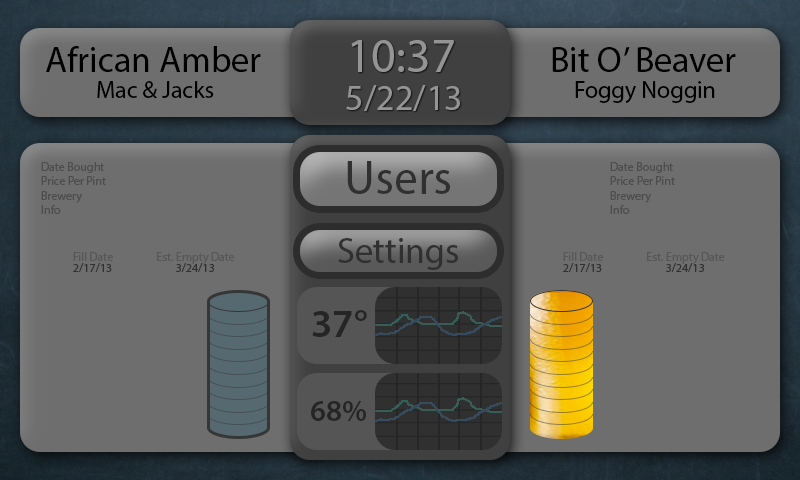
<style>
.page{position:relative;width:800px;height:480px;background:#6e6e6e}
.page>*{position:absolute;margin:0}
.t1{font:48px "MyriadPro-Regular";color:#949494}
.t2{font:36px "MyriadPro-Regular";color:#000000}
.t3{font:24px "MyriadPro-Regular";color:#000000}
.t4{font:36px "MyriadPro-Regular";color:#949494}
.t5{font:48px "MyriadPro-Regular";color:#303030}
.t6{font:12px "MyriadPro-Regular";color:#4d4d4d}
.t7{font:36px "MyriadPro-Regular";color:#303030}
.t8{font:12px "MyriadPro-Regular";color:#575757}
.t9{font:12px "MyriadPro-Regular";color:#313131}
.t10{font:40px "MyriadPro-Semibold";color:#252525}
.t11{font:30px "MyriadPro-Semibold";color:#252525}
</style>
<div class="page">
<p class="t1" style="left:351px;top:40px;width:103px;height:32px">10:37</p>
<p class="t2" style="left:46px;top:46px;width:215px;height:26px">African Amber</p>
<p class="t2" style="left:552px;top:47px;width:184px;height:25px">Bit O’ Beaver</p>
<p class="t3" style="left:97px;top:81px;width:117px;height:17px">Mac &amp; Jacks</p>
<p class="t4" style="left:346px;top:85px;width:114px;height:26px">5/22/13</p>
<p class="t3" style="left:575px;top:81px;width:140px;height:22px">Foggy Noggin</p>
<p class="t5" style="left:347px;top:161px;width:103px;height:33px">Users</p>
<p class="t6" style="left:41px;top:162px;width:65px;height:52px">Date Bought<br>Price Per Pint<br>Brewery<br>Info</p>
<p class="t6" style="left:610px;top:162px;width:65px;height:52px">Date Bought<br>Price Per Pint<br>Brewery<br>Info</p>
<p class="t7" style="left:338px;top:238px;width:120px;height:32px">Settings</p>
<p class="t8" style="left:73px;top:252px;width:162px;height:12px">Fill Date                 Est. Empty Date</p>
<p class="t8" style="left:563px;top:252px;width:162px;height:12px">Fill Date                 Est. Empty Date</p>
<p class="t9" style="left:73px;top:263px;width:141px;height:9px">2/17/13                         3/24/13</p>
<p class="t9" style="left:563px;top:263px;width:141px;height:9px">2/17/13                         3/24/13</p>
<p class="t10" style="left:312px;top:310px;width:55px;height:27px">37°</p>
<p class="t11" style="left:311px;top:401px;width:55px;height:20px">68%</p>
</div>
